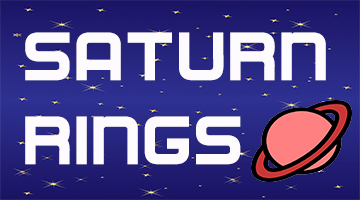
<style>
.page{position:relative;width:360px;height:200px}
.page>*{position:absolute;margin:0}
.t1{font:70px "Regen";color:#fefbfe}
</style>
<div class="page">
<p class="t1" style="left:25px;top:32px;width:301px;height:133px">SATURN<br>RINGS</p>
</div>
